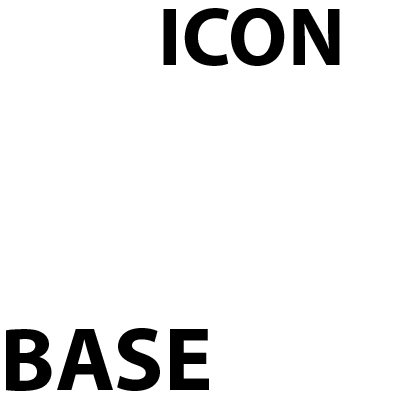
<style>
.page{position:relative;width:400px;height:400px;background:#ffffff}
.page>*{position:absolute;margin:0}
.t1{font:82.4px "MyriadPro-Bold";color:#000000}
.t2{font:91.1px "MyriadPro-Bold";color:#000000}
</style>
<div class="page">
<p class="t1" style="left:163px;top:8px;width:177px;height:58px">ICON</p>
<p class="t2" style="left:6px;top:328px;width:203px;height:63px">BASE</p>
</div>
